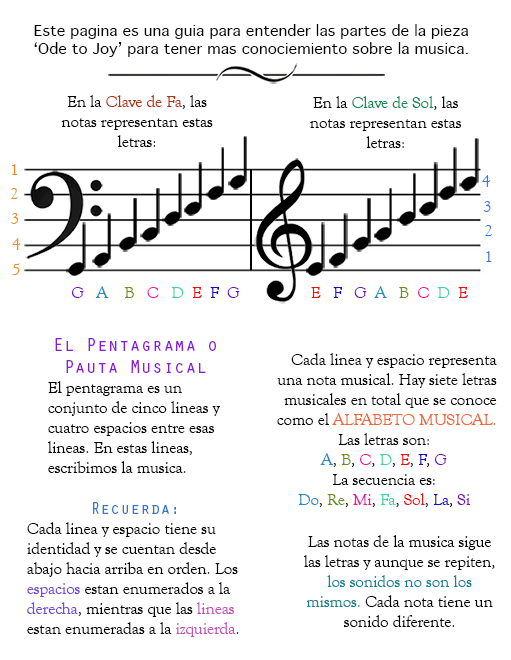
<style>
.page{position:relative;width:511px;height:660px;background:#ffffff}
.page>*{position:absolute;margin:0}
.t1{font:15px "Thonburi";color:#030006}
.t2{font:16.7px "GoudyOldStyleT-Regular";color:#010002}
.t3{font:16.7px "GoudyOldStyleT-Regular";color:#b6310e}
.t4{font:16.7px "GoudyOldStyleT-Regular";color:#108b58}
.t5{font:16.7px "GoudyOldStyleT-Regular";color:#f48725}
.t6{font:16.7px "GoudyOldStyleT-Regular";color:#377be2}
.t7{font:16.7px "GoudyOldStyleT-Regular";color:#7610bd}
.t8{font:16.7px "GoudyOldStyleT-Regular";color:#000000}
.t9{font:16.7px "GoudyOldStyleT-Regular";color:#258cc2}
.t10{font:16.7px "GoudyOldStyleT-Regular";color:#689019}
.t11{font:16.7px "GoudyOldStyleT-Regular";color:#ed19a0}
.t12{font:16.7px "GoudyOldStyleT-Regular";color:#3fd498}
.t13{font:16.7px "GoudyOldStyleT-Regular";color:#f00f0f}
.t14{font:16.7px "GoudyOldStyleT-Regular";color:#190cca}
.t15{font:18.3px "OratorStd";color:#8b1bd9}
.t16{font:16.7px "GoudyOldStyleT-Regular";color:#020002}
.t17{font:16.7px "GoudyOldStyleT-Regular";color:#f2673a}
.t18{font:16.7px "OratorStd";color:#2f78ca}
.t19{font:16.7px "GoudyOldStyleT-Regular";color:#764ada}
.t20{font:16.7px "GoudyOldStyleT-Regular";color:#c352ba}
.t21{font:16.7px "GoudyOldStyleT-Regular";color:#148394}
</style>
<div class="page">
<p class="t1" style="left:34px;top:24px;width:435px;height:33px;text-align:center">Este pagina es una guia para entender las partes de la pieza ‘Ode to Joy’ para tener mas conociemiento sobre la musica.</p>
<p class="t2" style="left:61px;top:95px;width:152px;height:52px;text-align:center">En la <span class="t3">Clave de Fa</span>, las notas representan estas letras:</p>
<p class="t2" style="left:310px;top:96px;width:152px;height:52px;text-align:center">En la <span class="t4">Clave de Sol</span>, las notas representan estas letras:</p>
<p class="t5" style="left:12px;top:164px;width:6px;height:11px">1</p>
<p class="t6" style="left:482px;top:175px;width:8px;height:12px">4</p>
<p class="t5" style="left:11px;top:188px;width:7px;height:11px">2</p>
<p class="t6" style="left:483px;top:201px;width:8px;height:11px">3</p>
<p class="t5" style="left:11px;top:213px;width:7px;height:11px">3</p>
<p class="t6" style="left:485px;top:225px;width:7px;height:11px">2</p>
<p class="t5" style="left:12px;top:238px;width:9px;height:12px">4</p>
<p class="t6" style="left:486px;top:251px;width:6px;height:11px">1</p>
<p class="t5" style="left:12px;top:263px;width:8px;height:12px">5</p>
<p class="t7" style="left:71px;top:286px;width:397px;height:12px"><span class="t8">         </span>G   <span class="t9">A    </span><span class="t10">B   </span><span class="t11">C   </span><span class="t12">D  </span><span class="t13">E  </span><span class="t14">F  </span>G                 <span class="t13">E   </span><span class="t14">F   </span>G  <span class="t9">A   </span><span class="t10">B  </span><span class="t11">C  </span><span class="t12">D  </span><span class="t13">E</span></p>
<p class="t2" style="left:48px;top:338px;width:172px;height:135px;text-align:center"><span class="t15">El Pentagrama o Pauta Musical<br></span>El pentagrama es un    conjunto de cinco lineas y cuatro espacios entre esas lineas. En estas lineas,    escribimos la musica.</p>
<p class="t16" style="left:277px;top:353px;width:220px;height:154px;text-align:right">Cada linea y espacio representa una nota musical. Hay siete letras musicales en total que se conoce como el <span class="t17">ALFABETO MUSICAL.<br></span>Las letras son:<br><span class="t9">A</span>, <span class="t10">B</span>, <span class="t11">C</span>, <span class="t12">D</span>, <span class="t13">E</span>, <span class="t14">F</span>, <span class="t7">G<br></span>La secuencia es:<br><span class="t9">Do</span>, <span class="t10">Re</span>, <span class="t11">Mi</span>, <span class="t12">Fa</span>, <span class="t13">Sol</span>, <span class="t14">La</span>, <span class="t7">Si</span></p>
<p class="t2" style="left:27px;top:502px;width:212px;height:135px;text-align:center"><span class="t18">Recuerda: <br></span>Cada linea y espacio tiene su       identidad y se cuentan desde abajo hacia arriba en orden. Los <span class="t19">espacios</span> estan enumerados a la <span class="t19">derecha</span>, mientras que las <span class="t20">lineas</span> estan enumeradas a la <span class="t20">izquierda</span>.</p>
<p class="t2" style="left:304px;top:535px;width:191px;height:92px;text-align:center">Las notas de la musica sigue las letras y aunque se repiten, <span class="t21">los sonidos no son los mismos.</span> Cada nota tiene un sonido diferente.</p>
</div>
